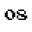
<style>
.page{position:relative;width:32px;height:32px;background:#ffffff}
.page>*{position:absolute;margin:0}
.t1{font:12px "PressStartK";color:#000000}
</style>
<div class="page">
<p class="t1" style="left:4px;top:9px;width:24px;height:11px">08</p>
</div>
